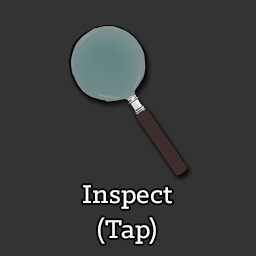
<style>
.page{position:relative;width:256px;height:256px;background:#333333}
.page>*{position:absolute;margin:0}
.t1{font:29.2px "KlinicSlab-Medium";color:#ffffff}
</style>
<div class="page">
<p class="t1" style="left:83px;top:185px;width:89px;height:59px;text-align:center">Inspect<br>(Tap)</p>
</div>
